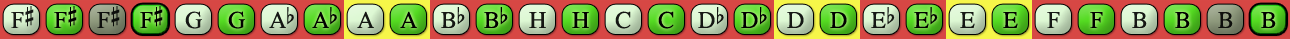
<style>
.page{position:relative;width:1290px;height:39px}
.page>*{position:absolute;margin:0}
.t1{font:24px "OpusChords";color:#000000}
.t2{font:24px "OpusChords";letter-spacing:-0.05em;color:#000000}
</style>
<div class="page">
<p class="t1" style="left:11px;top:6px;width:23px;height:22px;opacity:0.9">F#</p>
<p class="t1" style="left:54px;top:6px;width:23px;height:22px">F#</p>
<p class="t1" style="left:97px;top:6px;width:23px;height:22px;opacity:0.9">F#</p>
<p class="t1" style="left:140px;top:6px;width:23px;height:22px">F#</p>
<p class="t1" style="left:185px;top:11px;width:17px;height:18px;opacity:0.9">G</p>
<p class="t1" style="left:228px;top:11px;width:17px;height:18px">G</p>
<p class="t2" style="left:269px;top:7px;width:25px;height:21px;opacity:0.9">Ab</p>
<p class="t2" style="left:312px;top:7px;width:25px;height:21px">Ab</p>
<p class="t1" style="left:357px;top:11px;width:17px;height:17px;opacity:0.9">A</p>
<p class="t1" style="left:400px;top:11px;width:17px;height:17px">A</p>
<p class="t1" style="left:441px;top:7px;width:24px;height:21px;opacity:0.9">Bb</p>
<p class="t1" style="left:484px;top:7px;width:24px;height:21px">Bb</p>
<p class="t1" style="left:529px;top:12px;width:17px;height:16px;opacity:0.9">H</p>
<p class="t1" style="left:572px;top:12px;width:17px;height:16px">H</p>
<p class="t1" style="left:615px;top:11px;width:16px;height:18px;opacity:0.9">C</p>
<p class="t1" style="left:658px;top:11px;width:16px;height:18px">C</p>
<p class="t1" style="left:698px;top:7px;width:26px;height:21px;opacity:0.9">Db</p>
<p class="t1" style="left:741px;top:7px;width:26px;height:21px">Db</p>
<p class="t1" style="left:787px;top:12px;width:17px;height:16px;opacity:0.9">D</p>
<p class="t1" style="left:830px;top:12px;width:17px;height:16px">D</p>
<p class="t1" style="left:871px;top:7px;width:24px;height:21px;opacity:0.9">Eb</p>
<p class="t1" style="left:914px;top:7px;width:24px;height:21px">Eb</p>
<p class="t1" style="left:960px;top:12px;width:15px;height:16px;opacity:0.9">E</p>
<p class="t1" style="left:1003px;top:12px;width:15px;height:16px">E</p>
<p class="t1" style="left:1047px;top:12px;width:13px;height:16px;opacity:0.9">F</p>
<p class="t1" style="left:1090px;top:12px;width:13px;height:16px">F</p>
<p class="t1" style="left:1132px;top:12px;width:15px;height:16px;opacity:0.9">B</p>
<p class="t1" style="left:1175px;top:12px;width:15px;height:16px">B</p>
<p class="t1" style="left:1218px;top:12px;width:15px;height:16px;opacity:0.9">B</p>
<p class="t1" style="left:1261px;top:12px;width:15px;height:16px">B</p>
</div>
